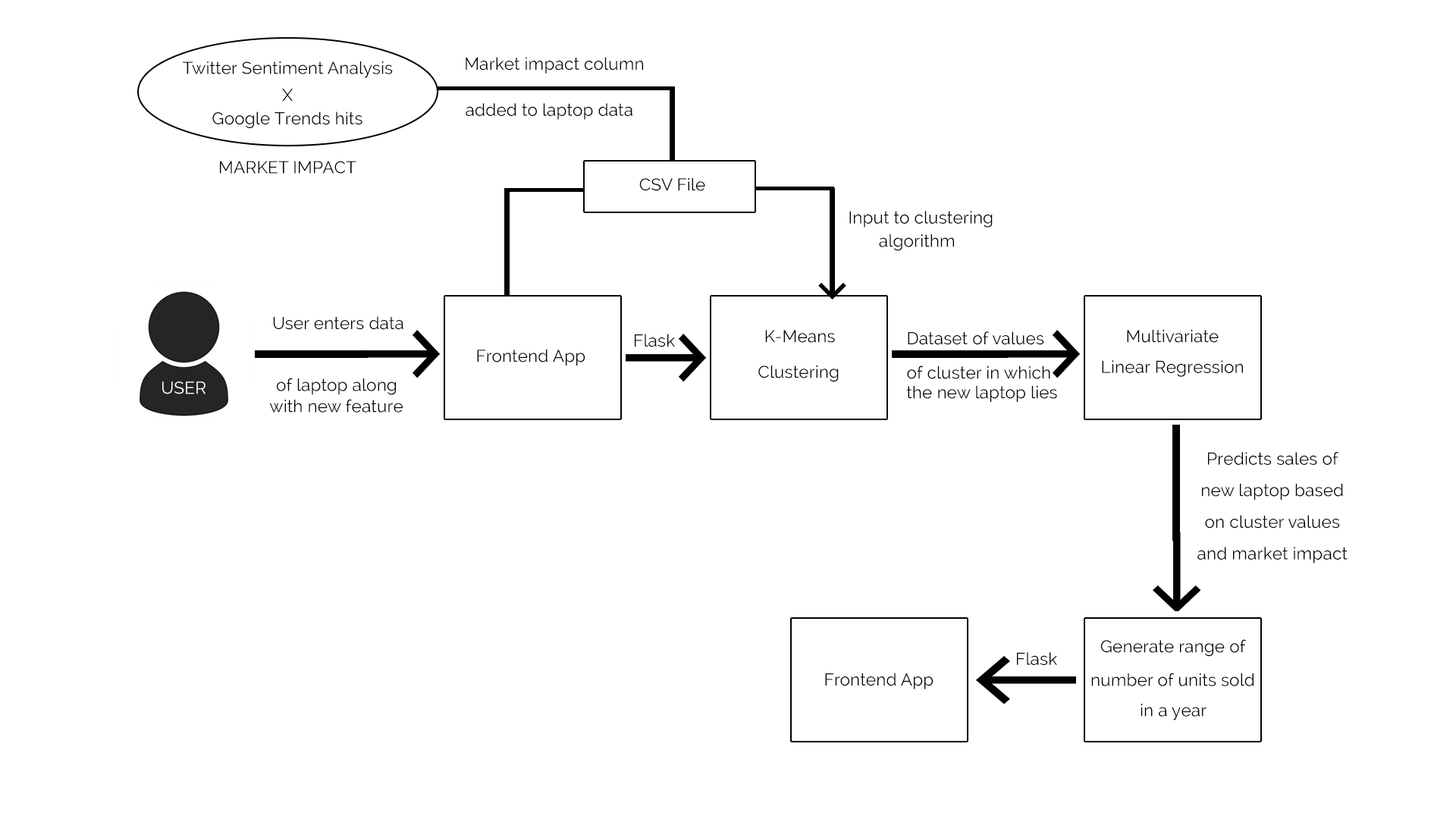
<style>
.page{position:relative;width:1456px;height:819px;background:#ffffff}
.page>*{position:absolute;margin:0}
.t1{font:17.1px "Raleway";letter-spacing:0.008em;color:#000000}
.t2{font:17.1px "Raleway";letter-spacing:0.008em;color:#ffffff}
.t3{font:17.1px/31.6px "Raleway";letter-spacing:0.008em;color:#000000}
</style>
<div class="page">
<p class="t1" style="left:183px;top:61px;width:210px;height:17px">Twitter Sentiment Analysis</p>
<p class="t1" style="left:466px;top:57px;width:177px;height:17px">Market impact column</p>
<p class="t1" style="left:282px;top:89px;width:11px;height:12px">X</p>
<p class="t1" style="left:212px;top:111px;width:150px;height:17px">Google Trends hits</p>
<p class="t1" style="left:466px;top:103px;width:166px;height:17px">added to laptop data</p>
<p class="t1" style="left:220px;top:161px;width:136px;height:13px">MARKET IMPACT</p>
<p class="t1" style="left:639px;top:177px;width:66px;height:14px">CSV File</p>
<p class="t1" style="left:849px;top:211px;width:144px;height:16px">Input to clustering</p>
<p class="t1" style="left:879px;top:234px;width:75px;height:17px">algorithm</p>
<p class="t1" style="left:273px;top:316px;width:130px;height:14px">User enters data</p>
<p class="t1" style="left:765px;top:330px;width:70px;height:13px">K-Means</p>
<p class="t1" style="left:1127px;top:329px;width:92px;height:14px">Multivariate</p>
<p class="t1" style="left:635px;top:334px;width:40px;height:13px">Flask</p>
<p class="t1" style="left:908px;top:331px;width:136px;height:14px">Dataset of values</p>
<p class="t1" style="left:477px;top:349px;width:108px;height:17px">Frontend App</p>
<p class="t1" style="left:758px;top:365px;width:81px;height:17px">Clustering</p>
<p class="t1" style="left:907px;top:366px;width:143px;height:13px">of cluster in which</p>
<p class="t1" style="left:1102px;top:360px;width:141px;height:17px">Linear Regression</p>
<p class="t1" style="left:277px;top:378px;width:119px;height:17px">of laptop along</p>
<p class="t2" style="left:162px;top:381px;width:44px;height:13px">USER</p>
<p class="t1" style="left:906px;top:385px;width:151px;height:17px">the new laptop lies</p>
<p class="t1" style="left:269px;top:399px;width:134px;height:14px">with new feature</p>
<p class="t3" style="left:1197px;top:452px;width:151px;height:111px;text-align:center">Predicts sales of<br>new laptop based<br>on cluster values<br>and market impact</p>
<p class="t1" style="left:1100px;top:639px;width:146px;height:18px">Generate range of</p>
<p class="t1" style="left:1017px;top:652px;width:40px;height:13px">Flask</p>
<p class="t1" style="left:825px;top:673px;width:108px;height:16px">Frontend App</p>
<p class="t1" style="left:1091px;top:673px;width:163px;height:13px">number of units sold</p>
<p class="t1" style="left:1141px;top:704px;width:65px;height:16px">in a year</p>
</div>
